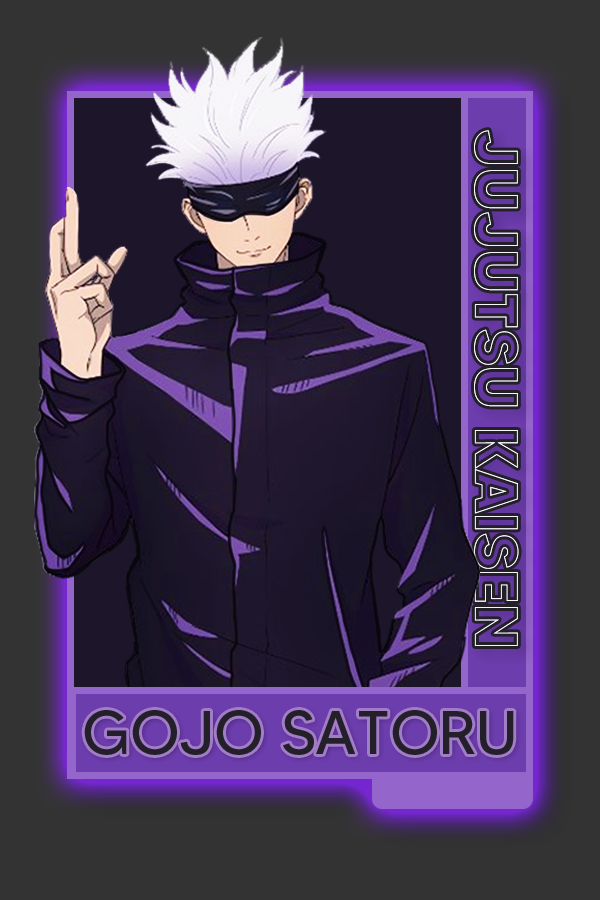
<style>
.page{position:relative;width:600px;height:900px;background:#333333}
.page>*{position:absolute;margin:0}
.t1{font:60.8px "MADETOMMYOutline-ExtraBold";color:#f2f0f3}
.t2{font:61.8px "MADETOMMY";color:#252525}
</style>
<div class="page">
<p class="t1" style="left:474px;top:130px;width:45px;height:516px;rotate:90deg">JUJUTSU KAISEN</p>
<p class="t2" style="left:84px;top:710px;width:430px;height:45px">GOJO SATORU</p>
</div>
